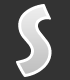
<style>
.page{position:relative;width:70px;height:80px;background:#333333}
.page>*{position:absolute;margin:0}
.t1{font:100px "BerlinSansFBDemi-Bold";letter-spacing:0.2em}
</style>
<div class="page">
<p class="t1" style="left:16px;top:4px;width:36px;height:73px">S</p>
</div>
